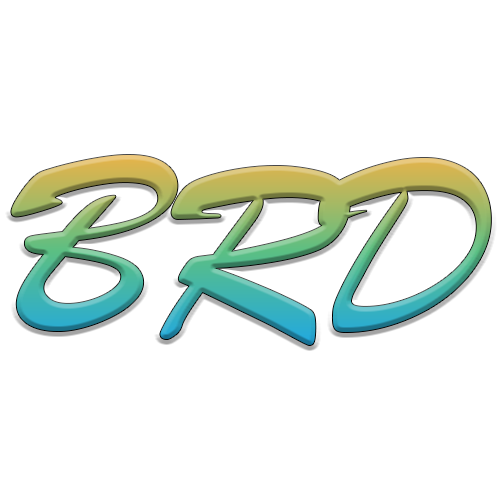
<style>
.page{position:relative;width:500px;height:500px;background:#ffffff}
.page>*{position:absolute;margin:0}
.t1{font:263.5px "BrushScriptMT"}
</style>
<div class="page">
<p class="t1" style="left:11px;top:155px;width:480px;height:190px">BRD</p>
</div>
